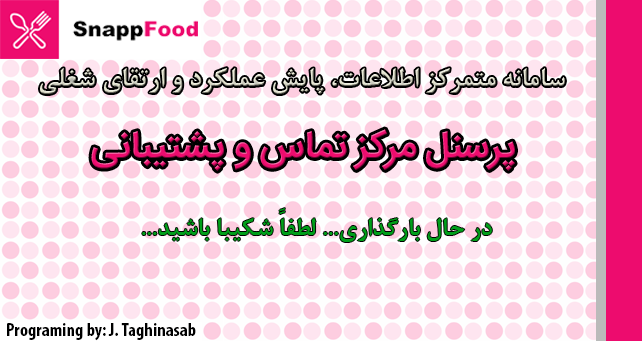
<style>
.page{position:relative;width:642px;height:341px}
.page>*{position:absolute;margin:0}
.t1{font:37.5px "IRANSansWeb-Bold"}
.t2{font:27.1px "BNazaninBold";color:#009f1a}
.t3{font:18.8px "MyriadPro-BoldCond";color:#000000}
</style>
<div class="page">
<p class="t1" style="left:91px;top:129px;width:424px;height:42px">پرسنل مرکز تماس و پشتیبانی</p>
<p class="t2" style="left:142px;top:208px;width:350px;height:34px">در حال بارگذاری... لطفاً شکیبا باشید...</p>
<p class="t3" style="left:7px;top:323px;width:189px;height:18px">Programing by: J. Taghinasab</p>
</div>
